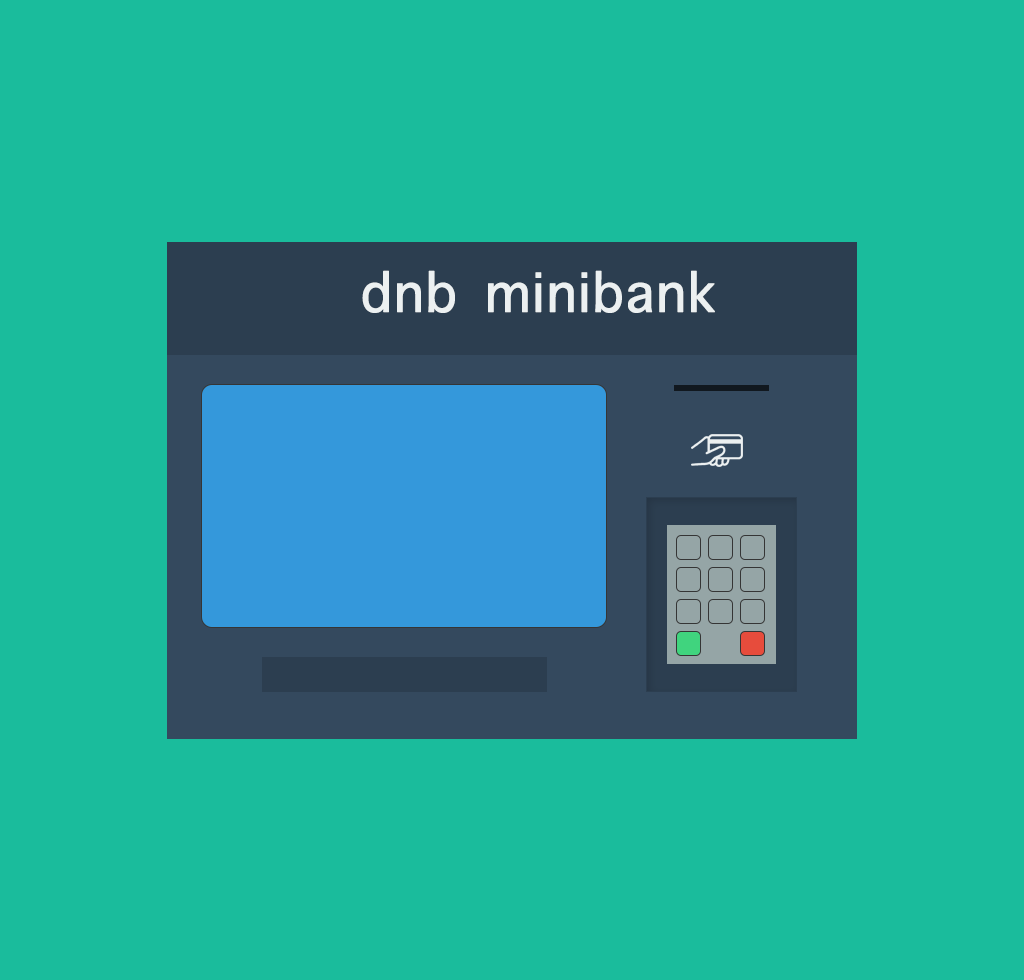
<style>
.page{position:relative;width:1024px;height:980px;background:#1abc9c}
.page>*{position:absolute;margin:0}
.t1{font:72.2px "AppleSymbols";color:#ecf0f1;font-weight:bold}
</style>
<div class="page">
<p class="t1" style="left:362px;top:270px;width:353px;height:43px">dnb minibank</p>
</div>
